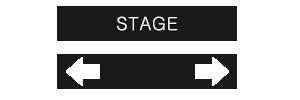
<style>
.page{position:relative;width:300px;height:100px;background:#ffffff}
.page>*{position:absolute;margin:0}
.t1{font:18px "Gulim";letter-spacing:0.04em;color:#f7f6f2;text-transform:uppercase}
</style>
<div class="page">
<p class="t1" style="left:117px;top:16px;width:61px;height:15px">STAGE</p>
</div>
